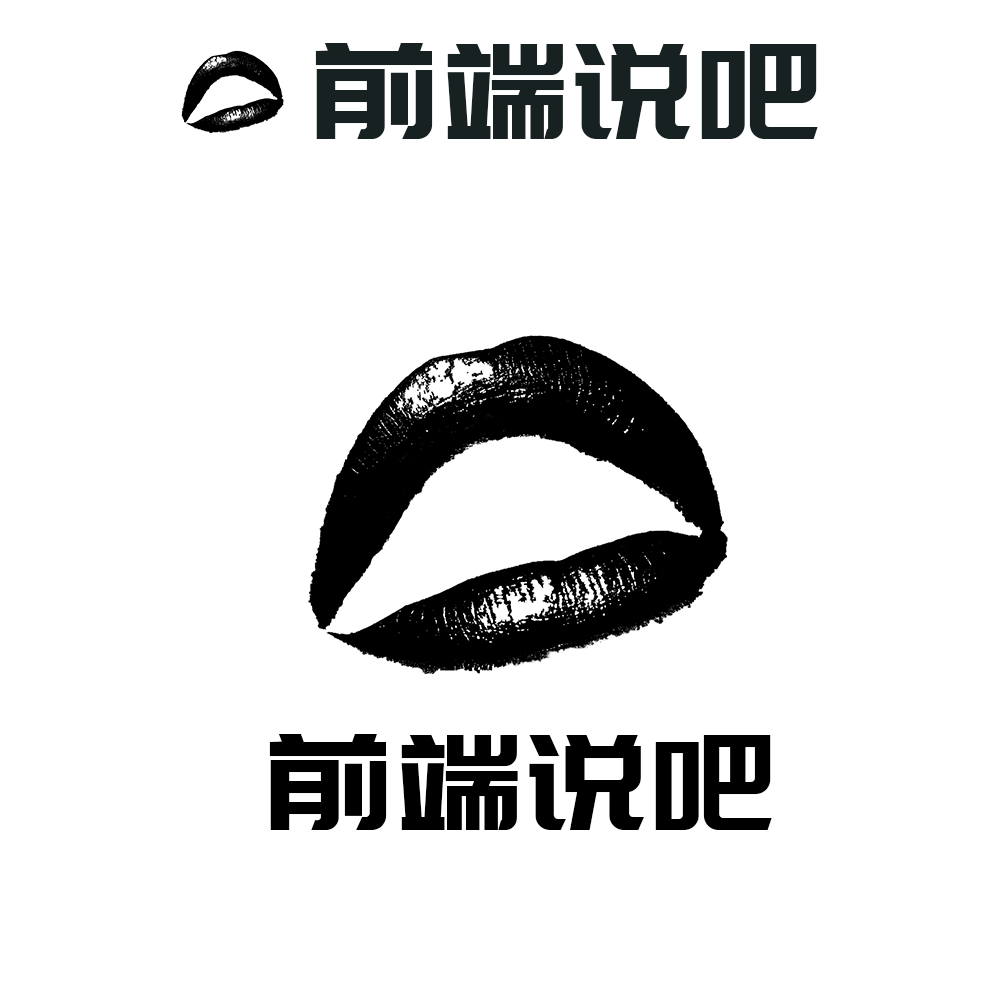
<style>
.page{position:relative;width:1000px;height:1000px;background:#ffffff}
.page>*{position:absolute;margin:0}
.t1{font:132px "PangMenZhengDao";letter-spacing:0.04em;color:#172122}
.t2{font:132px "PangMenZhengDao";letter-spacing:0.04em;color:#000000}
</style>
<div class="page">
<p class="t1" style="left:315px;top:43px;width:503px;height:96px">前端说吧</p>
<p class="t2" style="left:269px;top:734px;width:503px;height:96px">前端说吧</p>
</div>
